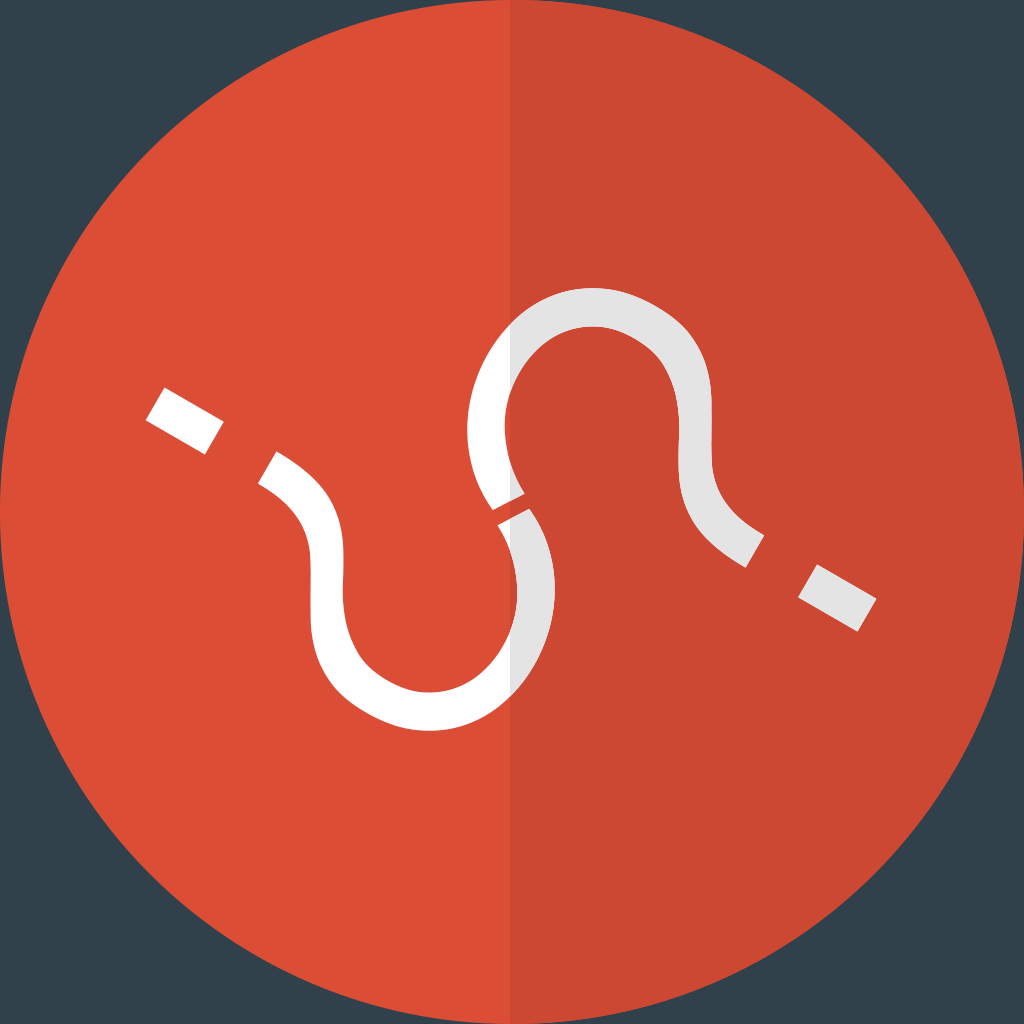
<style>
.page{position:relative;width:1024px;height:1024px;background:#db4d35}
.page>*{position:absolute;margin:0}
.t1{font:638px "Raleway-Regular";color:#e5e4e4;text-transform:uppercase}
.t2{font:638px "Raleway-Regular";color:#ffffff;text-transform:uppercase}
</style>
<div class="page">
<p class="t1" style="left:467px;top:288px;width:410px;height:344px;rotate:-60deg">?</p>
<p class="t1" style="left:467px;top:288px;width:410px;height:344px;rotate:-60deg">?</p>
<p class="t2" style="left:145px;top:387px;width:410px;height:344px;rotate:120deg">?</p>
<p class="t2" style="left:145px;top:387px;width:410px;height:344px;rotate:120deg">?</p>
</div>
